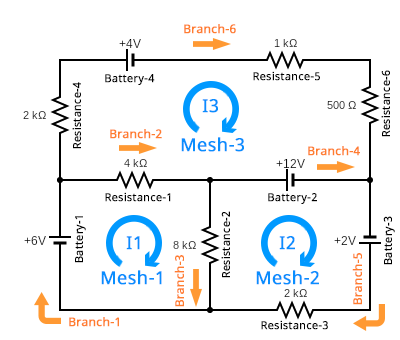
<style>
.page{position:relative;width:400px;height:340px;background:#ffffff}
.page>*{position:absolute;margin:0}
.t1{font:12px "NotoSans-Regular";color:#ff7d2e;font-weight:bold}
.t2{font:11px "NotoSans-Regular";color:#000000;font-weight:bold}
.t3{font:18px "NotoSans-Regular";color:#098efe;font-weight:bold}
</style>
<div class="page">
<p class="t1" style="left:184px;top:24px;width:52px;height:10px">Branch-6</p>
<p class="t2" style="left:105px;top:74px;width:50px;height:11px">Battery-4</p>
<p class="t2" style="left:253px;top:71px;width:67px;height:10px">Resistance-5</p>
<p class="t2" style="left:381px;top:70px;width:9px;height:67px;rotate:-90deg">Resistance-6</p>
<p class="t2" style="left:72px;top:82px;width:9px;height:67px;rotate:-90deg">Resistance-4</p>
<p class="t3" style="left:202px;top:99px;width:16px;height:14px">I3</p>
<p class="t1" style="left:110px;top:129px;width:52px;height:10px">Branch-2</p>
<p class="t3" style="left:181px;top:137px;width:63px;height:15px">Mesh-3</p>
<p class="t1" style="left:308px;top:146px;width:52px;height:10px">Branch-4</p>
<p class="t2" style="left:105px;top:192px;width:66px;height:10px">Resistance-1</p>
<p class="t2" style="left:268px;top:193px;width:49px;height:11px">Battery-2</p>
<p class="t2" style="left:75px;top:216px;width:11px;height:47px;rotate:-90deg">Battery-1</p>
<p class="t2" style="left:221px;top:211px;width:9px;height:67px;rotate:-90deg">Resistance-2</p>
<p class="t2" style="left:383px;top:216px;width:12px;height:49px;rotate:-90deg">Battery-3</p>
<p class="t3" style="left:126px;top:236px;width:14px;height:14px">I1</p>
<p class="t3" style="left:279px;top:236px;width:16px;height:14px">I2</p>
<p class="t1" style="left:174px;top:255px;width:10px;height:52px;rotate:-90deg">Branch-3</p>
<p class="t1" style="left:352px;top:253px;width:10px;height:52px;rotate:-90deg">Branch-5</p>
<p class="t3" style="left:101px;top:270px;width:61px;height:15px">Mesh-1</p>
<p class="t3" style="left:256px;top:270px;width:63px;height:15px">Mesh-2</p>
<p class="t1" style="left:69px;top:317px;width:50px;height:10px">Branch-1</p>
<p class="t2" style="left:261px;top:320px;width:67px;height:10px">Resistance-3</p>
</div>
